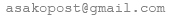
<style>
.page{position:relative;width:170px;height:16px;background:#ffffff}
.page>*{position:absolute;margin:0}
.t1{font:14px "CourierNewPSMT";color:#828282}
</style>
<div class="page">
<p class="t1" style="left:6px;top:3px;width:160px;height:12px">asakopost@gmail.com</p>
</div>
